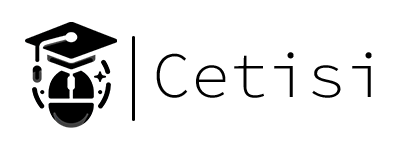
<style>
.page{position:relative;width:400px;height:150px;background:#ffffff}
.page>*{position:absolute;margin:0}
.t1{font:64.6px "SourceCodePro-Light";color:#000000}
</style>
<div class="page">
<p class="t1" style="left:156px;top:52px;width:216px;height:46px">Cetisi</p>
</div>
